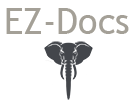
<style>
.page{position:relative;width:135px;height:100px;background:#ffffff}
.page>*{position:absolute;margin:0}
.t1{font:36px "TrebuchetMS";color:#a4a097}
</style>
<div class="page">
<p class="t1" style="left:6px;top:8px;width:123px;height:26px">EZ-Docs</p>
</div>
